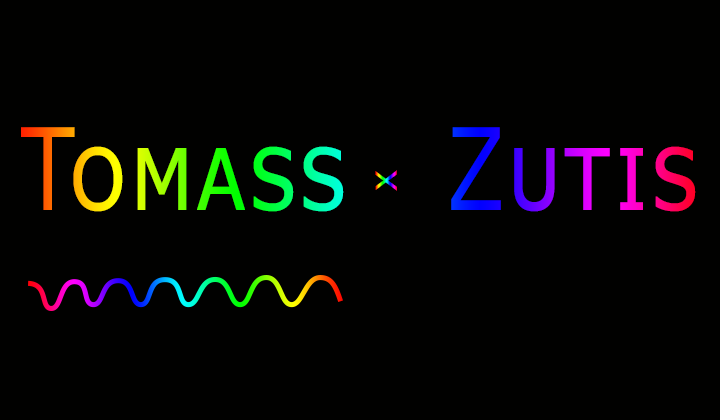
<style>
.page{position:relative;width:720px;height:420px;background:#010100}
.page>*{position:absolute;margin:0}
.t1{font:113.8px "Verdana";letter-spacing:0.02em;font-variant:small-caps;scale:0.76 1}
.t2{font:38.2px "ArialMT";letter-spacing:0.02em;font-variant:small-caps}
</style>
<div class="page">
<p class="t1" style="left:21px;top:127px;width:675px;height:85px">Tomass   Zutis</p>
<p class="t2" style="left:375px;top:170px;width:22px;height:21px;rotate:-91deg">x</p>
</div>
